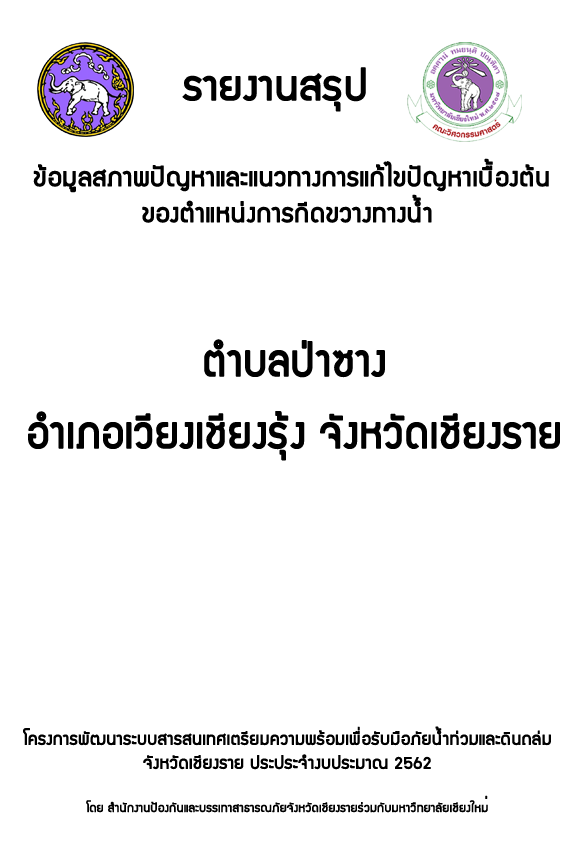
<style>
.page{position:relative;width:567px;height:842px;background:#ffffff}
.page>*{position:absolute;margin:0}
.t1{font:44.6px "supermarket";color:#000000;font-weight:bold}
.t2{font:27.9px "supermarket";color:#000000;font-weight:bold}
.t3{font:48px/72px "supermarket";color:#000000;font-weight:bold;scale:0.95 1}
.t4{font:18.6px "supermarket";color:#000000;font-weight:bold}
.t5{font:13px "supermarket";color:#000000;font-weight:bold}
.t6{font:16.7px "supermarket";color:#000000;font-weight:bold}
</style>
<div class="page">
<p class="t1" style="left:182px;top:67px;width:184px;height:45px">รายงานสรุป</p>
<p class="t2" style="left:33px;top:158px;width:516px;height:65px;text-align:center">ข้อมูลสภาพปัญหาและแนวทางการแก้ไขปัญหาเบื้องต้น<br>ของตำแหน่งการกีดขวางทางน้ำ</p>
<p class="t3" style="left:28px;top:339px;width:532px;height:122px;text-align:center">ตำบลป่าซาง<br>อำเภอเวียงเชียงรุ้ง จังหวัดเชียงราย</p>
<p class="t4" style="left:23px;top:726px;width:528px;height:87px;text-align:center">โครงการพัฒนาระบบสารสนเทศเตรียมความพร้อมเพื่อรับมือภัยน้ำท่วมและดินถล่ม<br>จังหวัดเชียงราย ประประจำงบประมาณ 2562<br><br><span class="t5">โดย สำนักงานป้องกันและบรรเทาสาธารณภัยจังหวัดเชียงรายร่วมกับมหาวืทยาลัยเชียงใหม</span><span class="t6">่</span></p>
</div>
